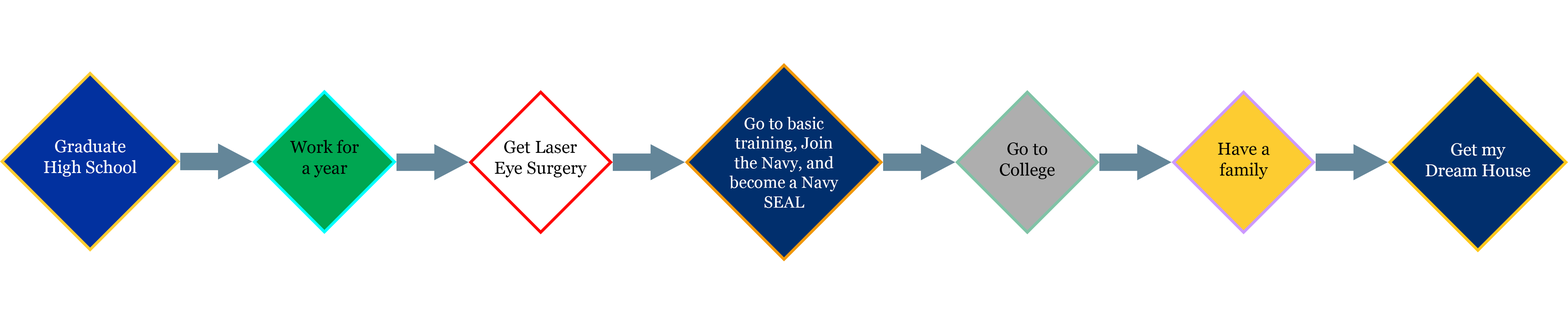
<style>
.page{position:relative;width:1568px;height:323px;background:#ffffff}
.page>*{position:absolute;margin:0}
.t1{font:16.3px "Georgia";color:#ffffff}
.t2{font:17.3px "Georgia";color:#ffffff}
.t3{font:17.3px "Georgia";color:#000000}
</style>
<div class="page">
<p class="t1" style="left:729px;top:117px;width:109px;height:91px;text-align:center">Go to basic<br>training, Join<br>the Navy, and<br>become a Navy<br>SEAL</p>
<p class="t2" style="left:44px;top:139px;width:93px;height:38px;text-align:center">Graduate<br>High School</p>
<p class="t3" style="left:290px;top:140px;width:69px;height:37px;text-align:center">Work for<br>a year</p>
<p class="t3" style="left:495px;top:141px;width:92px;height:36px;text-align:center">Get Laser<br>Eye Surgery</p>
<p class="t3" style="left:1000px;top:142px;width:55px;height:37px;text-align:center">Go to<br>College</p>
<p class="t3" style="left:1218px;top:143px;width:52px;height:36px;text-align:center">Have a<br>family</p>
<p class="t2" style="left:1426px;top:143px;width:105px;height:34px;text-align:center">Get my<br>Dream House</p>
</div>
